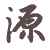
<style>
.page{position:relative;width:50px;height:50px;background:#ffffff}
.page>*{position:absolute;margin:0}
.t1{font:48px "HYi6gf";color:#5d4a4a;font-weight:bold}
</style>
<div class="page">
<p class="t1" style="left:6px;top:4px;width:39px;height:39px">源</p>
</div>
